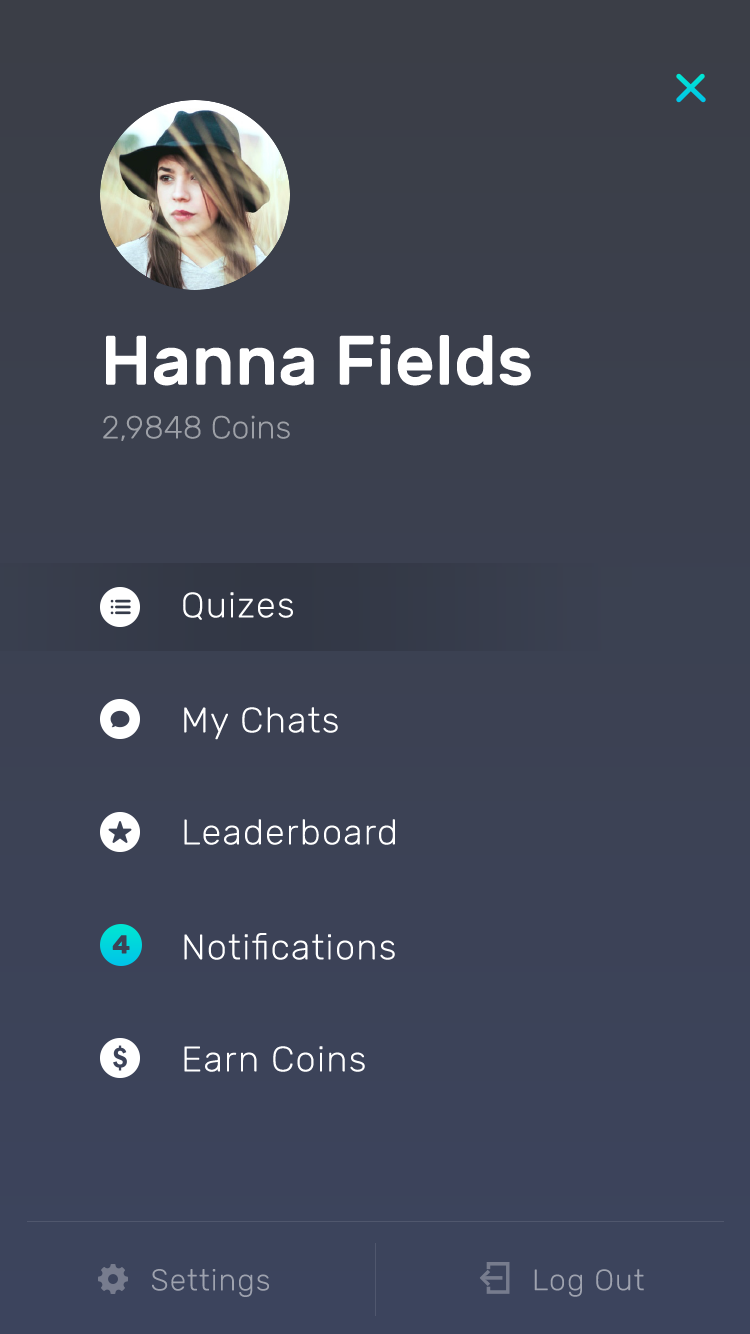
<style>
.page{position:relative;width:750px;height:1334px}
.page>*{position:absolute;margin:0}
.t1{font:70px "Rubik-Medium";color:#ffffff}
.t2{font:32px "Rubik-Light";color:#9da0a7}
.t3{font:36px "Rubik-Light";letter-spacing:0.035em;color:#ffffff}
.t4{font:35.9px "Rubik-Light";letter-spacing:0.035em;color:#ffffff}
.t5{font:26px "Rubik-Bold";letter-spacing:0.035em;color:#3c4256}
.t6{font:30px "Rubik-Light";letter-spacing:0.035em;color:#9ea2ae}
.t7{font:29.6px "Rubik-Light";letter-spacing:0.035em;color:#9ea2ae}
</style>
<div class="page">
<p class="t1" style="left:106px;top:335px;width:425px;height:51px">Hanna Fields</p>
<p class="t2" style="left:103px;top:415px;width:187px;height:26px">2,9848 Coins</p>
<p class="t3" style="left:183px;top:592px;width:110px;height:28px">Quizes</p>
<p class="t3" style="left:184px;top:707px;width:154px;height:33px">My Chats</p>
<p class="t4" style="left:184px;top:819px;width:211px;height:26px">Leaderboard</p>
<p class="t5" style="left:112px;top:935px;width:18px;height:19px">4</p>
<p class="t4" style="left:184px;top:933px;width:211px;height:27px">Notifications</p>
<p class="t4" style="left:184px;top:1046px;width:181px;height:26px">Earn Coins</p>
<p class="t6" style="left:152px;top:1269px;width:117px;height:28px">Settings</p>
<p class="t7" style="left:534px;top:1269px;width:110px;height:28px">Log Out</p>
</div>
